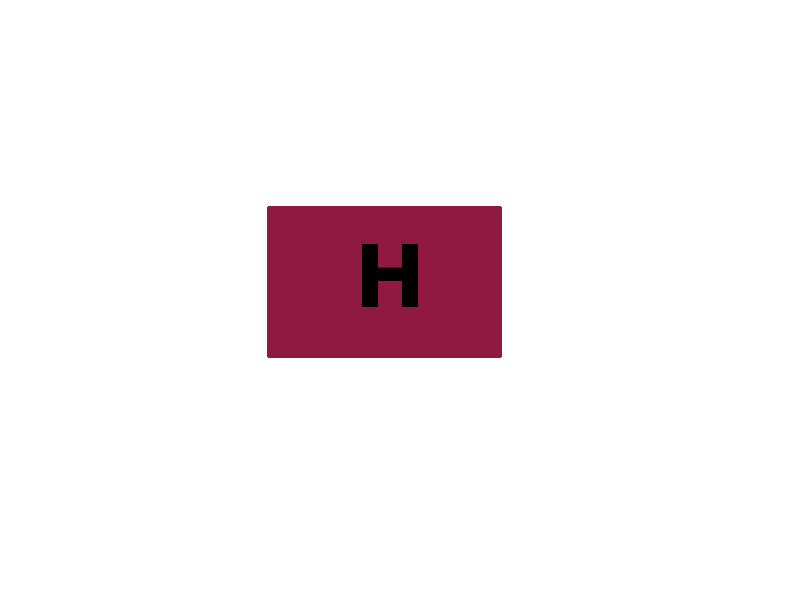
<style>
.page{position:relative;width:800px;height:600px;background:#ffffff}
.page>*{position:absolute;margin:0}
.t1{font:100px "BakbakOne-Regular";color:#000000}
</style>
<div class="page">
<p class="t1" style="left:362px;top:244px;width:56px;height:63px">H</p>
</div>
